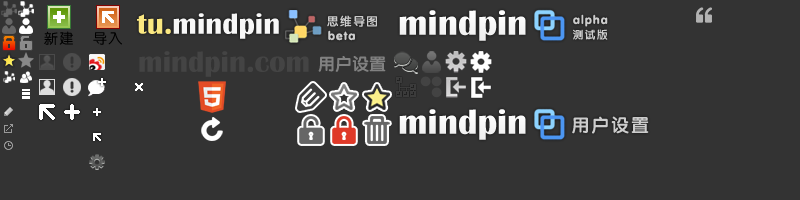
<style>
.page{position:relative;width:800px;height:200px;background:#333333}
.page>*{position:absolute;margin:0}
.t1{font:30px "BritannicBold";color:#f7f7f7}
.t2{font:30px "BritannicBold";color:#fbe881}
.t3{font:12px "FZY4JW--GB1-0";letter-spacing:0.1em;color:#cccccc}
.t4{font:36px "BritannicBold";color:#f7f7f7}
.t5{font:11px "FZY4JW--GB1-0";letter-spacing:0.1em;color:#cccccc}
.t6{font:14px "FZY3JW--GB1-0";letter-spacing:0.1em;color:#000000}
.t7{font:30px "BritannicBold";color:#444444}
.t8{font:17px "FZY4JW--GB1-0";color:#818181}
.t9{font:18px "FZY4JW--GB1-0";letter-spacing:0.1em;color:#cccccc}
</style>
<div class="page">
<p class="t1" style="left:137px;top:13px;width:142px;height:26px"><span class="t2">tu.</span>mindpin</p>
<p class="t3" style="left:327px;top:15px;width:50px;height:12px">思维导图</p>
<p class="t4" style="left:399px;top:10px;width:127px;height:31px">mindpin</p>
<p class="t3" style="left:573px;top:14px;width:35px;height:13px">alpha</p>
<p class="t3" style="left:328px;top:30px;width:27px;height:11px">beta</p>
<p class="t5" style="left:573px;top:29px;width:35px;height:11px">测试版</p>
<p class="t6" style="left:44px;top:31px;width:29px;height:14px">新建</p>
<p class="t6" style="left:93px;top:32px;width:29px;height:13px">导入</p>
<p class="t7" style="left:139px;top:51px;width:170px;height:26px">mindpin.com</p>
<p class="t8" style="left:318px;top:56px;width:68px;height:16px">用户设置</p>
<p class="t4" style="left:399px;top:109px;width:127px;height:31px">mindpin</p>
<p class="t9" style="left:572px;top:116px;width:77px;height:18px">用户设置</p>
</div>
